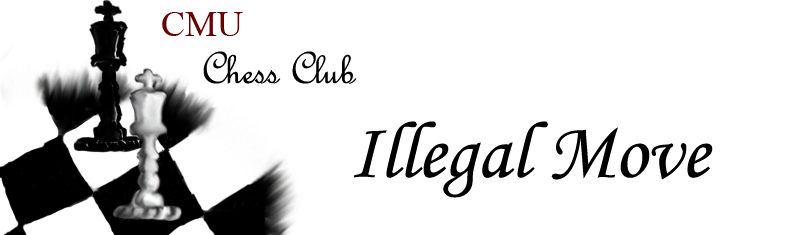
<style>
.page{position:relative;width:800px;height:235px;background:#ffffff}
.page>*{position:absolute;margin:0}
.t1{font:36px "TimesNewRomanPSMT";color:#660000}
.t2{font:48px "FrenchScriptMT";color:#000000}
.t3{font:80px "MonotypeCorsiva";color:#000000}
</style>
<div class="page">
<p class="t1" style="left:162px;top:12px;width:81px;height:24px">CMU</p>
<p class="t2" style="left:203px;top:51px;width:154px;height:33px">Chess Club</p>
<p class="t3" style="left:353px;top:121px;width:360px;height:77px">Illegal Move</p>
</div>
